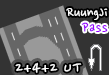
<style>
.page{position:relative;width:109px;height:75px;background:#333333}
.page>*{position:absolute;margin:0}
.t1{font:16px "NanumPen";color:#ffffff}
.t2{font:16px "NanumPen";letter-spacing:0.05em;color:#9900ff}
.t3{font:18px "NanumPen";letter-spacing:0.05em;color:#ffffff}
</style>
<div class="page">
<p class="t1" style="left:66px;top:8px;width:42px;height:12px">RuungJi</p>
<p class="t2" style="left:81px;top:22px;width:27px;height:10px">Pass</p>
<p class="t3" style="left:15px;top:62px;width:67px;height:11px">2+4+2 UT</p>
</div>
